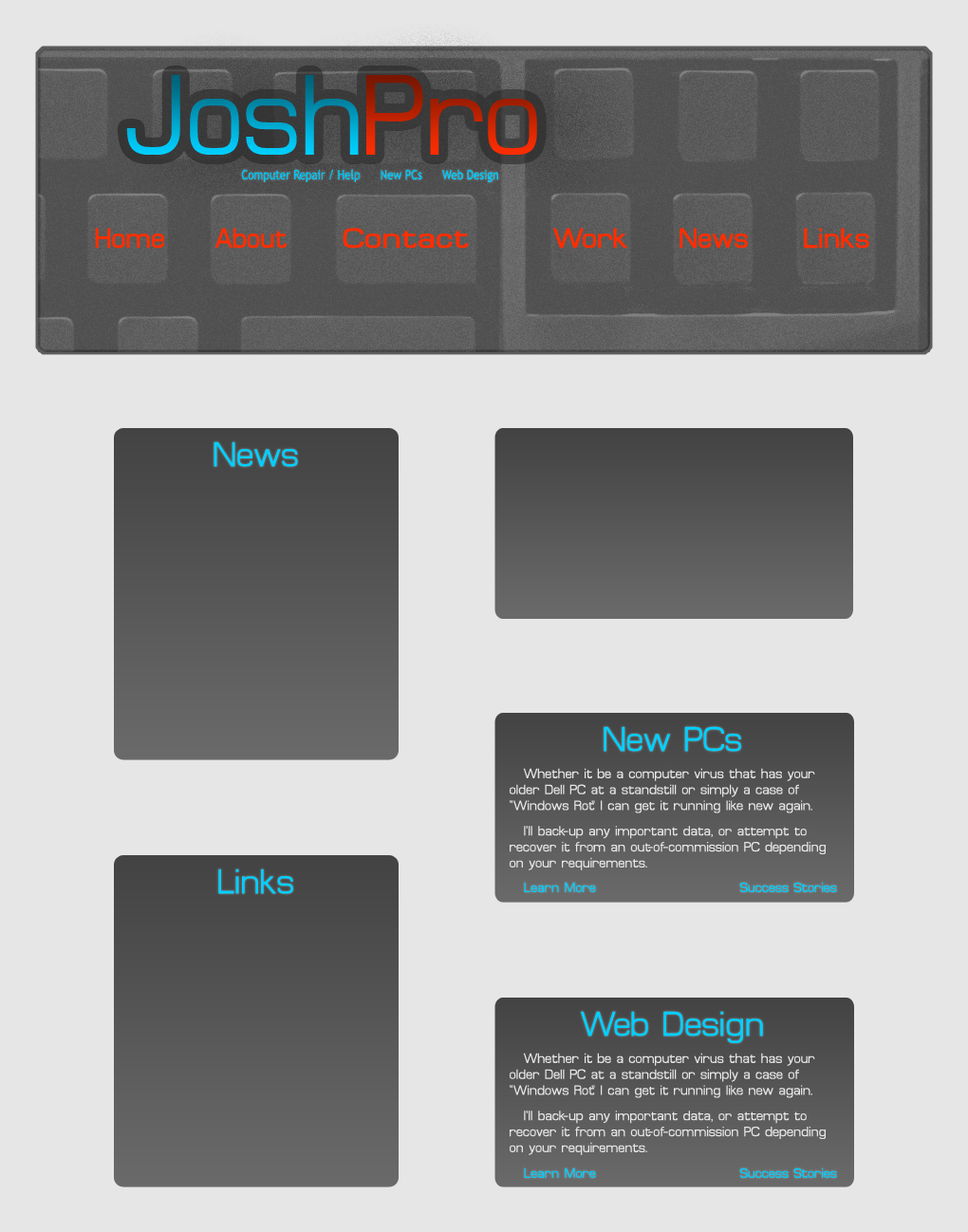
<style>
.page{position:relative;width:968px;height:1232px;background:#e6e6e6}
.page>*{position:absolute;margin:0}
.t1{font:112.7px "MinimaSSK"}
.t2{font:112.7px "MinimaSSK";font-variant:small-caps}
.t3{font:13.3px "TrebuchetMS";color:#00cfff;scale:0.83 1}
.t4{font:26.6px "MinimaSSK";color:#fe2e01;font-weight:bold}
.t5{font:26.6px "MinimaSSK";color:#fe2e01;font-weight:bold;scale:0.95 1}
.t6{font:26.6px "MinimaSSK";color:#fe2e01;font-weight:bold;scale:1.23 1}
.t7{font:26.6px "MinimaSSK";color:#fe2e01;font-weight:bold;scale:1.08 1}
.t8{font:26.6px "MinimaSSK";color:#fe2e01;font-weight:bold;scale:1.05 1}
.t9{font:34.2px "MinimaSSK";color:#00cfff}
.t10{font:13.3px "MinimaSSK";color:#e6e6e6}
.t11{font:13.3px "MinimaSSK";color:#00cfff}
</style>
<div class="page">
<p class="t1" style="left:126px;top:75px;width:411px;height:80px">Josh<span class="t2">P</span>ro</p>
<p class="t3" style="left:241px;top:169px;width:257px;height:13px">Computer Repair / Help      New PCs      Web Design</p>
<p class="t4" style="left:95px;top:228px;width:69px;height:21px">Home</p>
<p class="t5" style="left:215px;top:228px;width:72px;height:21px">About</p>
<p class="t6" style="left:343px;top:228px;width:126px;height:21px">Contact</p>
<p class="t7" style="left:553px;top:228px;width:74px;height:21px">Work</p>
<p class="t4" style="left:680px;top:228px;width:68px;height:21px">News</p>
<p class="t8" style="left:804px;top:228px;width:65px;height:21px">Links</p>
<p class="t9" style="left:214px;top:441px;width:84px;height:26px">News</p>
<p class="t9" style="left:604px;top:726px;width:137px;height:26px">New PCs</p>
<p class="t10" style="left:510px;top:768px;width:316px;height:102px">Whether it be a computer virus that has your older Dell PC at a standstill or simply a case of “Windows Rot” I can get it running like new again.<br>I’ll back-up any important data, or attempt to recover it from an out-of-commission PC depending on your requirements.</p>
<p class="t9" style="left:218px;top:868px;width:75px;height:26px">Links</p>
<p class="t11" style="left:524px;top:882px;width:313px;height:10px">Learn More                            Success Stories</p>
<p class="t9" style="left:581px;top:1011px;width:182px;height:32px">Web Design</p>
<p class="t10" style="left:510px;top:1052px;width:316px;height:103px">Whether it be a computer virus that has your older Dell PC at a standstill or simply a case of “Windows Rot” I can get it running like new again.<br>I’ll back-up any important data, or attempt to recover it from an out-of-commission PC depending on your requirements.</p>
<p class="t11" style="left:524px;top:1167px;width:313px;height:11px">Learn More                            Success Stories</p>
</div>
